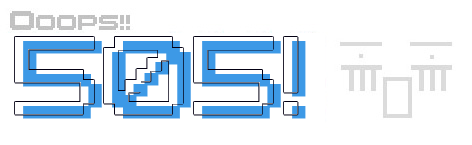
<style>
.page{position:relative;width:472px;height:145px;background:#ffffff}
.page>*{position:absolute;margin:0}
.t1{font:98px "BMspaceA9";color:#3d99e6;font-weight:bold}
</style>
<div class="page">
<p class="t1" style="left:23px;top:41px;width:283px;height:78px">505!</p>
</div>
